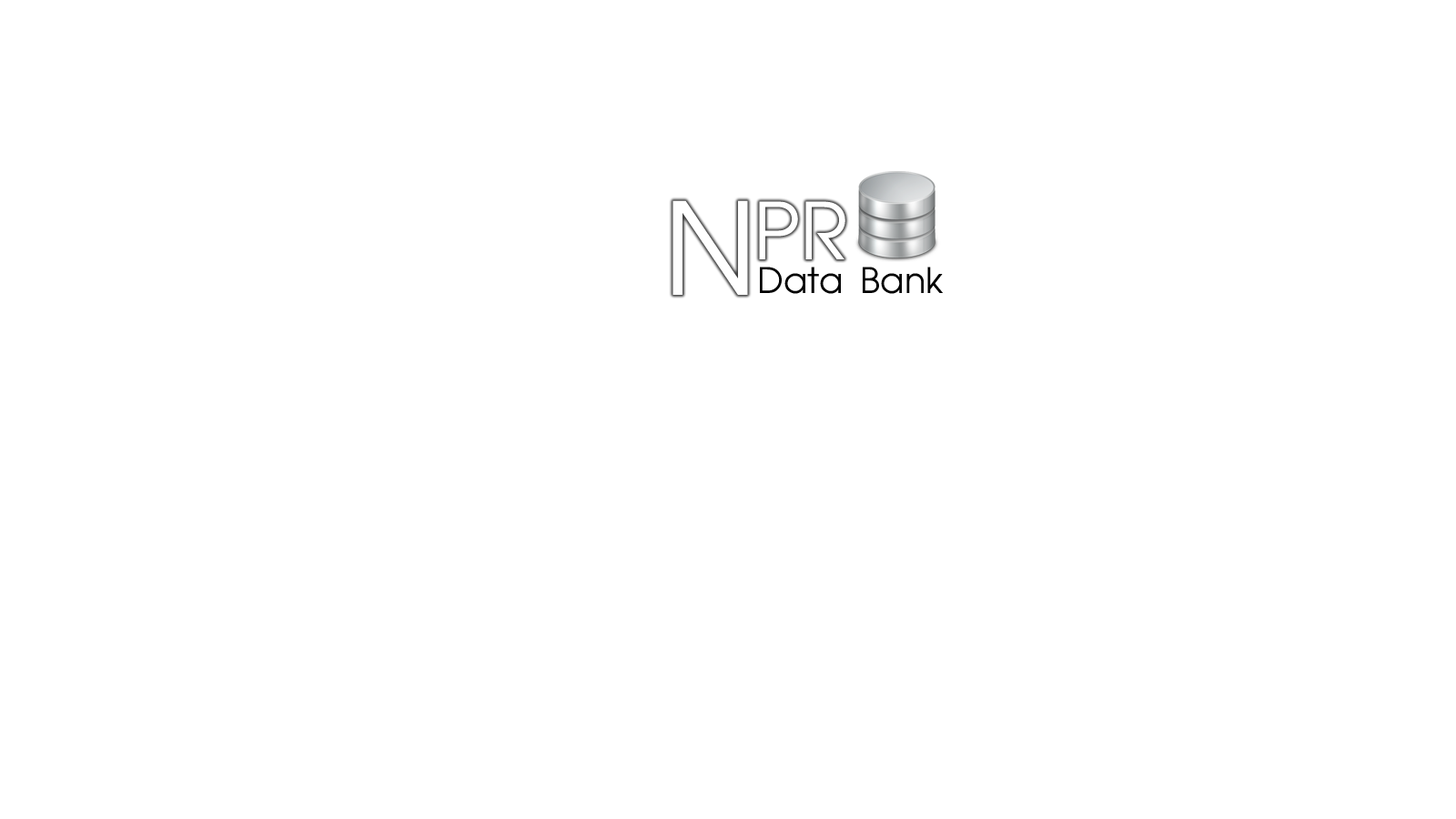
<style>
.page{position:relative;width:1456px;height:819px;background:#ffffff}
.page>*{position:absolute;margin:0}
.t1{font:70.2px "XDB-FongnamMath";color:#000000}
</style>
<div class="page">
<p class="t1" style="left:760px;top:267px;width:183px;height:27px">Data Bank</p>
</div>
